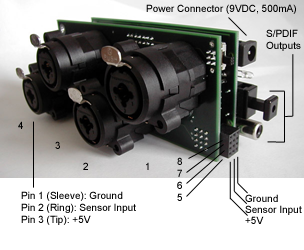
<style>
.page{position:relative;width:304px;height:250px;background:#ffffff}
.page>*{position:absolute;margin:0}
.t1{font:10px "ArialMT";color:#000000}
.t2{font:10px "ArialMT"}
</style>
<div class="page">
<p class="t1" style="left:146px;top:4px;width:150px;height:10px">Power Connector (9VDC, 500mA)</p>
<p class="t1" style="left:266px;top:29px;width:35px;height:22px">S/PDIF<br>Outputs</p>
<p class="t1" style="left:18px;top:121px;width:5px;height:8px">4</p>
<p class="t1" style="left:55px;top:141px;width:5px;height:8px">3</p>
<p class="t1" style="left:177px;top:157px;width:5px;height:44px">8<br>7<br>6<br>5</p>
<p class="t1" style="left:83px;top:162px;width:5px;height:8px">2</p>
<p class="t2" style="left:146px;top:162px;width:3px;height:8px">1</p>
<p class="t1" style="left:21px;top:191px;width:115px;height:34px">Pin 1 (Sleeve): Ground<br>Pin 2 (Ring): Sensor Input<br>Pin 3 (Tip): +5V</p>
<p class="t1" style="left:245px;top:194px;width:33px;height:8px">Ground</p>
<p class="t1" style="left:245px;top:205px;width:57px;height:10px">Sensor Input</p>
<p class="t1" style="left:245px;top:216px;width:19px;height:8px">+5V</p>
</div>
